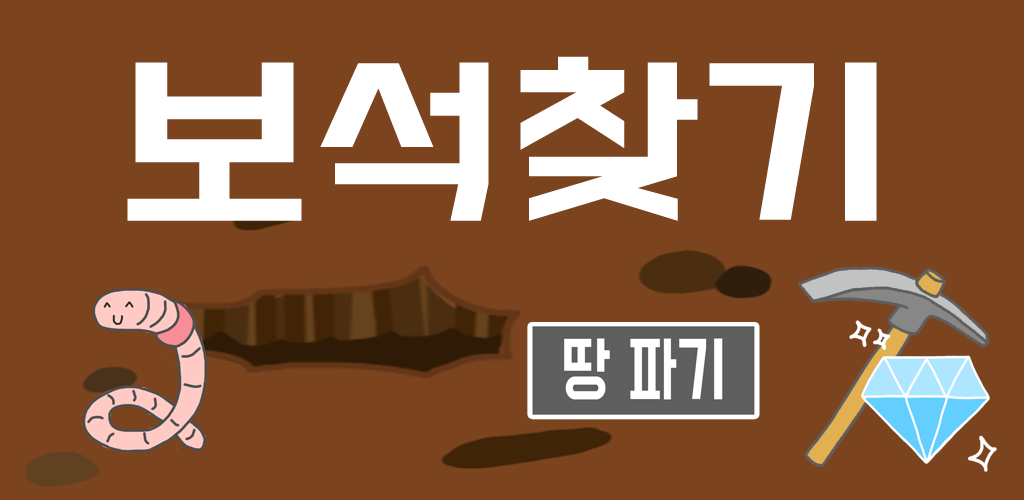
<style>
.page{position:relative;width:1024px;height:500px;background:#7b441f}
.page>*{position:absolute;margin:0}
.t1{font:167.1px "BMDoHyeon";color:#ffffff;scale:1.21 1}
</style>
<div class="page">
<p class="t1" style="left:127px;top:56px;width:750px;height:165px">보석찾기</p>
</div>
